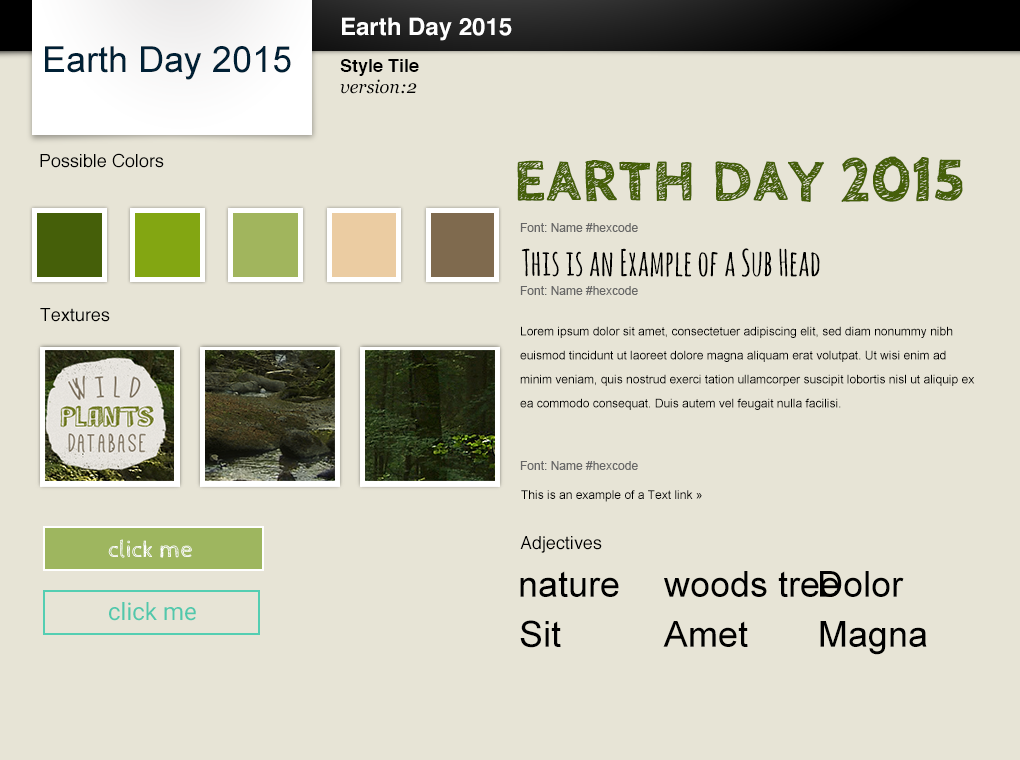
<style>
.page{position:relative;width:1020px;height:760px;background:#e7e4d6}
.page>*{position:absolute;margin:0}
.t1{font:24px "Helvetica-Bold";color:#ffffff}
.t2{font:36px "ArialMT";color:#002035}
.t3{font:18px "Helvetica-Bold";color:#000000}
.t4{font:18px "Georgia-Italic";color:#000000}
.t5{font:18px "Helvetica";color:#000000}
.t6{font:60px "CabinSketch-Bold";color:#455f09;font-weight:bold}
.t7{font:12px "ArialMT";color:#666666}
.t8{font:36px "AmaticSC-Bold";color:#000000}
.t9{font:12px/24px "ArialMT";color:#000000}
.t10{font:12px "ArialMT";color:#000000}
.t11{font:24px "CabinSketch-Regular";color:#ffffff}
.t12{font:36px "ArialMT";color:#000000}
.t13{font:24px "Roboto-Regular";color:#51c8ac}
</style>
<div class="page">
<p class="t1" style="left:342px;top:17px;width:170px;height:24px">Earth Day 2015</p>
<p class="t2" style="left:45px;top:46px;width:246px;height:34px">Earth Day 2015</p>
<p class="t3" style="left:340px;top:59px;width:79px;height:17px">Style Tile</p>
<p class="t4" style="left:340px;top:79px;width:77px;height:15px">version:2</p>
<p class="t5" style="left:40px;top:153px;width:124px;height:15px">Possible Colors</p>
<p class="t6" style="left:517px;top:156px;width:446px;height:46px">EARTH DAY 2015</p>
<p class="t7" style="left:520px;top:223px;width:118px;height:9px">Font: Name #hexcode</p>
<p class="t8" style="left:521px;top:248px;width:299px;height:29px">This is an Example of a Sub Head</p>
<p class="t7" style="left:520px;top:286px;width:118px;height:9px">Font: Name #hexcode</p>
<p class="t5" style="left:40px;top:308px;width:70px;height:14px">Textures</p>
<p class="t9" style="left:520px;top:326px;width:455px;height:84px">Lorem ipsum dolor sit amet, consectetuer adipiscing elit, sed diam nonummy nibh euismod tincidunt ut laoreet dolore magna aliquam erat volutpat. Ut wisi enim ad minim veniam, quis nostrud exerci tation ullamcorper suscipit lobortis nisl ut aliquip ex ea commodo consequat. Duis autem vel feugait nulla facilisi.</p>
<p class="t7" style="left:520px;top:461px;width:118px;height:9px">Font: Name #hexcode</p>
<p class="t10" style="left:521px;top:490px;width:181px;height:12px">This is an example of a Text link »</p>
<p class="t11" style="left:108px;top:539px;width:84px;height:19px">click me</p>
<p class="t5" style="left:520px;top:536px;width:82px;height:17px">Adjectives</p>
<p class="t12" style="left:520px;top:571px;width:99px;height:26px">nature</p>
<p class="t12" style="left:664px;top:571px;width:175px;height:26px">woods tree</p>
<p class="t12" style="left:820px;top:571px;width:84px;height:26px">Dolor</p>
<p class="t13" style="left:109px;top:602px;width:87px;height:19px">click me</p>
<p class="t12" style="left:520px;top:620px;width:41px;height:28px">Sit</p>
<p class="t12" style="left:663px;top:621px;width:85px;height:26px">Amet</p>
<p class="t12" style="left:820px;top:621px;width:107px;height:34px">Magna</p>
</div>
